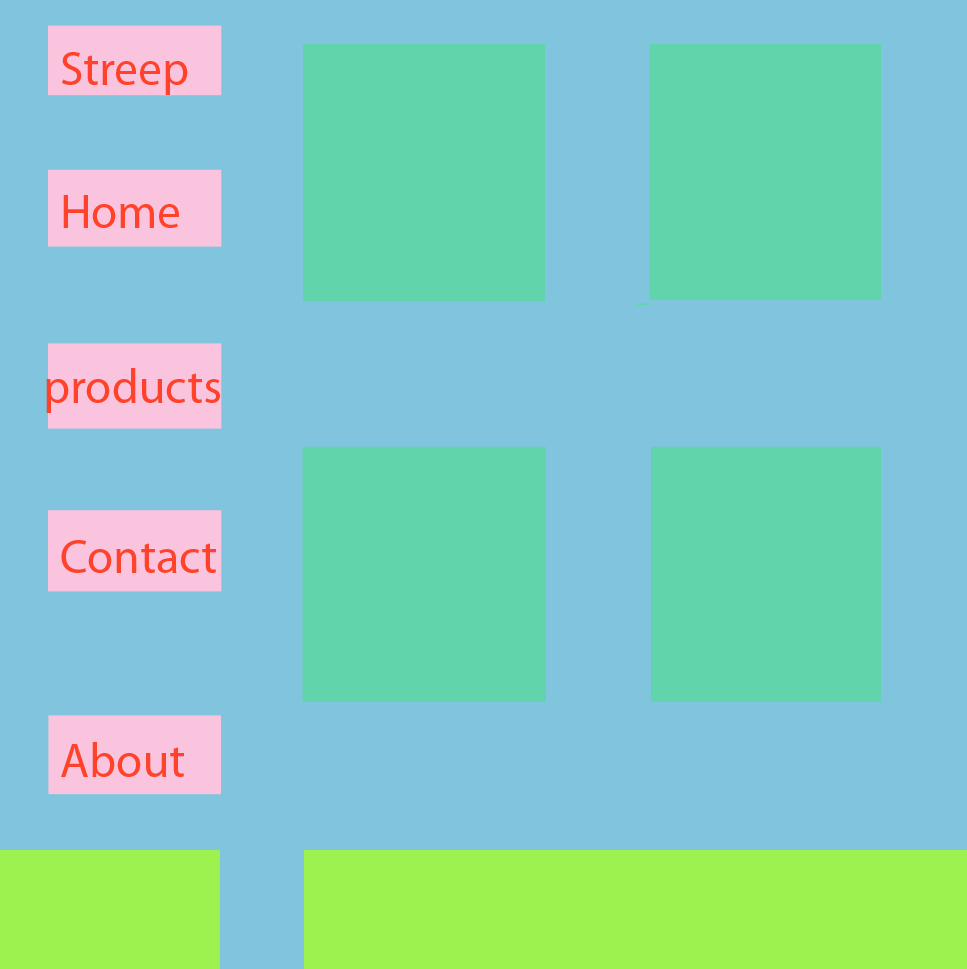
<style>
.page{position:relative;width:967px;height:969px;background:#80c4de}
.page>*{position:absolute;margin:0}
.t1{font:48px "MyriadPro-Regular";color:#ff4229}
</style>
<div class="page">
<p class="t1" style="left:62px;top:52px;width:126px;height:43px">Streep</p>
<p class="t1" style="left:63px;top:195px;width:116px;height:33px">Home</p>
<p class="t1" style="left:46px;top:368px;width:174px;height:45px">products</p>
<p class="t1" style="left:61px;top:540px;width:155px;height:33px">Contact</p>
</div>
